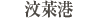
<style>
.page{position:relative;width:97px;height:18px;background:#ffffff}
.page>*{position:absolute;margin:0}
.t1{font:18px "RyuminPro-ExBold";color:#4c4843;scale:0.9 1}
</style>
<div class="page">
<p class="t1" style="left:24px;top:0px;width:49px;height:18px">汶萊港</p>
</div>
